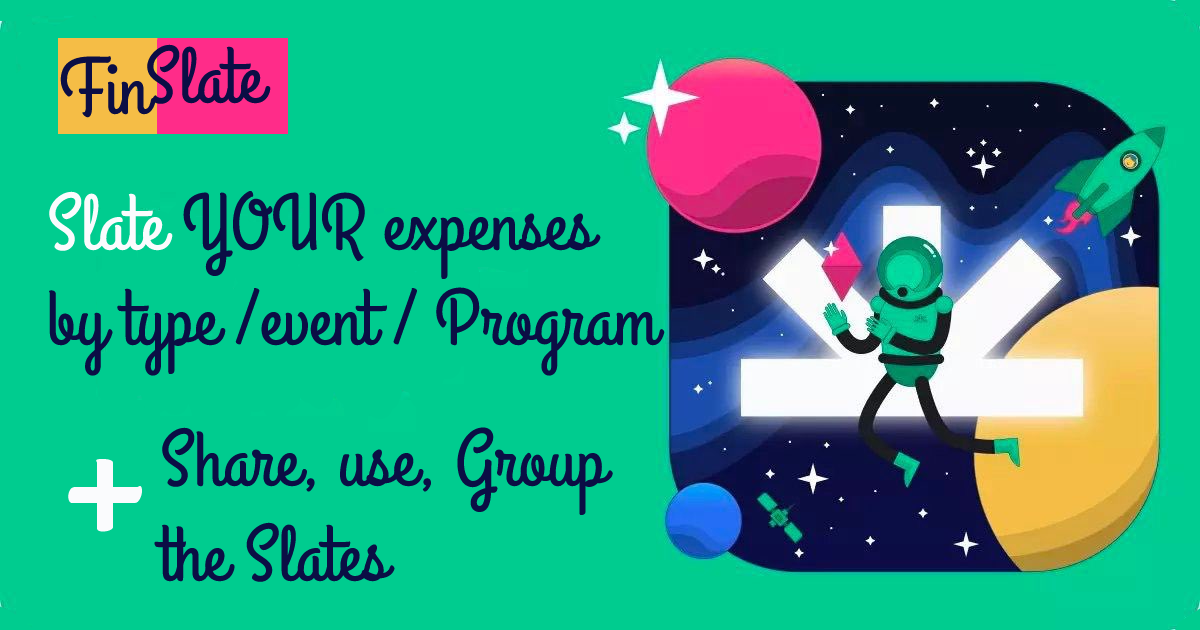
<style>
.page{position:relative;width:1200px;height:630px;background:#00cc8f}
.page>*{position:absolute;margin:0}
.t1{font:79.2px "GrandHotel-Regular";color:#0b0e45}
.t2{font:79.2px "GrandHotel-Regular";color:#fafbfd}
.t3{font:228.5px "GrandHotel-Regular";color:#fafbfd}
</style>
<div class="page">
<p class="t1" style="left:60px;top:56px;width:96px;height:62px">Fin</p>
<p class="t1" style="left:48px;top:190px;width:617px;height:186px"><span class="t2">Slate </span>YOUR expenses <br>by type /event / Program</p>
<p class="t1" style="left:153px;top:427px;width:460px;height:155px">Share, use, Group <br>the Slates</p>
<p class="t3" style="left:68px;top:459px;width:74px;height:73px">+</p>
</div>
